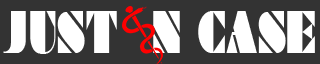
<style>
.page{position:relative;width:320px;height:64px;background:#333333}
.page>*{position:absolute;margin:0}
.t1{font:53.8px "Braggadocio";color:#ffffff;scale:0.62 1}
</style>
<div class="page">
<p class="t1" style="left:3px;top:11px;width:312px;height:43px">JUST  N CASE</p>
</div>
